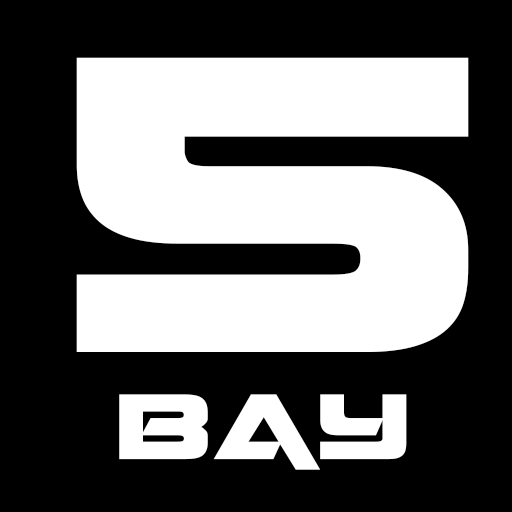
<style>
.page{position:relative;width:512px;height:512px;background:#000000}
.page>*{position:absolute;margin:0}
.t1{font:660.8px "QuarkStorm";color:#ffffff;font-variant:small-caps}
.t2{font:144.9px "QuarkStorm";color:#ffffff;font-variant:small-caps}
</style>
<div class="page">
<p class="t1" style="left:76px;top:57px;width:393px;height:295px">5</p>
<p class="t2" style="left:119px;top:394px;width:288px;height:76px">BAY</p>
</div>
